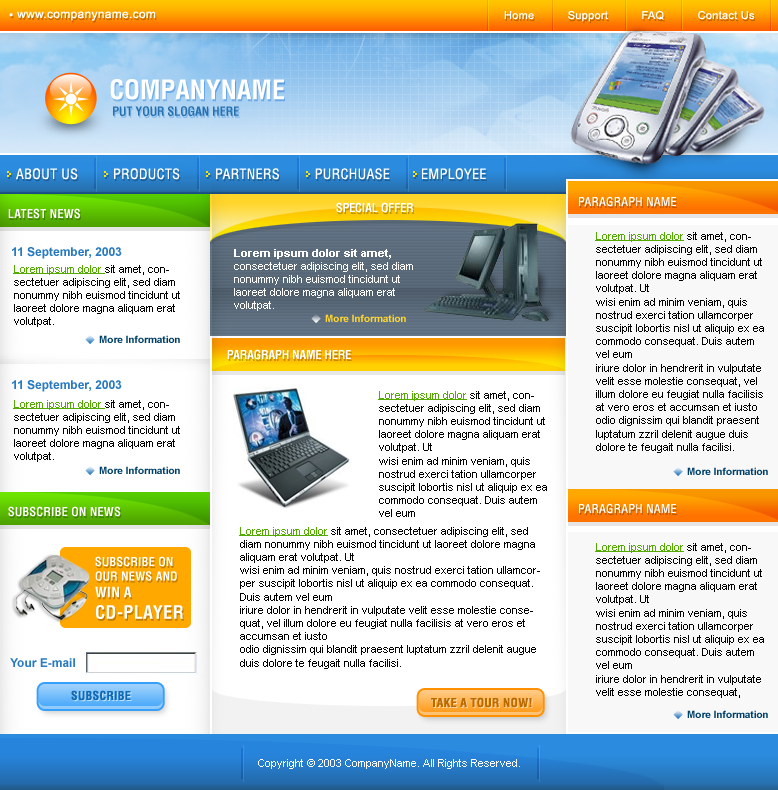
<style>
.page{position:relative;width:778px;height:790px;background:#ffffff}
.page>*{position:absolute;margin:0}
.t1{font:12px "ArialMT";letter-spacing:0.025em;color:#ffffff}
.t2{font:11px "ArialMT";letter-spacing:0.025em;color:#ffffff}
.t3{font:26.4px "AGLettericaCondensed-Bold";color:#ffffff;text-transform:uppercase}
.t4{font:12.1px "AGLettericaCondensed-Bold";color:#2770ae;text-transform:uppercase}
.t5{font:14px "AGLettericaCondensed-Roman";letter-spacing:0.025em;color:#ffffff;text-transform:uppercase}
.t6{font:12px "AGLettericaCondensed-Roman";letter-spacing:0.025em;color:#ffffff;text-transform:uppercase}
.t7{font:12px "AGLettericaCondensed-Bold";letter-spacing:0.025em;color:#ffffff;text-transform:uppercase}
.t8{font:12px "AGLettericaCondensed-Bold";color:#ffffff;text-transform:uppercase}
.t9{font:11px "ArialMT";color:#000000}
.t10{font:11px "ArialMT";color:#54ab00;text-decoration:underline}
.t11{font:12px "Arial-BoldMT";color:#287bc1}
.t12{font:11px "ArialMT";color:#ffffff}
.t13{font:11px "Arial-BoldMT";color:#ffffff}
.t14{font:10px "Arial-BoldMT";color:#ffd62f}
.t15{font:10px "Arial-BoldMT";color:#00416a}
.t16{font:14px "AGLettericaCondensed-Bold";letter-spacing:0.025em;color:#ffffff;text-transform:uppercase}
.t17{font:18px "AGLettericaCondensed-Bold";letter-spacing:0.025em;color:#ffffff;text-transform:uppercase}
.t18{font:12px "AGLettericaCondensed-Bold";letter-spacing:0.025em;color:#116ab5;text-transform:uppercase}
.t19{font:12px "AGLettericaCondensed-Bold";letter-spacing:0.025em;color:#bb6a00;text-transform:uppercase}
</style>
<div class="page">
<p class="t1" style="left:9px;top:11px;width:147px;height:10px">• www.companyname.com</p>
<p class="t2" style="left:504px;top:10px;width:251px;height:12px">Home          Support          FAQ          Contact Us</p>
<p class="t3" style="left:110px;top:79px;width:174px;height:21px">COMPANYNAME</p>
<p class="t4" style="left:113px;top:106px;width:126px;height:10px">put your slogan here</p>
<p class="t5" style="left:16px;top:168px;width:470px;height:12px">About Us         Products         Partners         Purchuase        Employee</p>
<p class="t6" style="left:579px;top:196px;width:97px;height:11px">Paragraph name</p>
<p class="t7" style="left:8px;top:208px;width:72px;height:11px">Latest News</p>
<p class="t8" style="left:336px;top:202px;width:77px;height:11px">Special offer</p>
<p class="t9" style="left:595px;top:232px;width:169px;height:221px"><span class="t10">Lorem ipsum dolor</span> sit amet, consectetuer adipiscing elit, sed diam nonummy nibh euismod tincidunt ut laoreet dolore magna aliquam erat volutpat. Ut<br>wisi enim ad minim veniam, quis nostrud exerci tation ullamcorper suscipit lobortis nisl ut aliquip ex ea commodo consequat. Duis autem vel eum<br>iriure dolor in hendrerit in vulputate velit esse molestie consequat, vel illum dolore eu feugiat nulla facilisis at vero eros et accumsan et iusto<br>odio dignissim qui blandit praesent luptatum zzril delenit augue duis dolore te feugait nulla facilisi.</p>
<p class="t11" style="left:12px;top:247px;width:110px;height:12px">11 September, 2003</p>
<p class="t12" style="left:234px;top:249px;width:179px;height:62px"><span class="t13">Lorem ipsum dolor sit amet, </span>consectetuer adipiscing elit, sed diam nonummy nibh euismod tincidunt ut laoreet dolore magna aliquam erat volutpat.</p>
<p class="t9" style="left:13px;top:265px;width:167px;height:62px"><span class="t10">Lorem ipsum dolor </span>sit amet, consectetuer adipiscing elit, sed diam nonummy nibh euismod tincidunt ut laoreet dolore magna aliquam erat volutpat.</p>
<p class="t14" style="left:325px;top:314px;width:81px;height:8px">More Information</p>
<p class="t15" style="left:99px;top:335px;width:81px;height:8px">More Information</p>
<p class="t8" style="left:227px;top:349px;width:124px;height:11px">paragraph name here</p>
<p class="t11" style="left:12px;top:380px;width:110px;height:12px">11 September, 2003</p>
<p class="t9" style="left:13px;top:400px;width:167px;height:62px"><span class="t10">Lorem ipsum dolor </span>sit amet, consectetuer adipiscing elit, sed diam nonummy nibh euismod tincidunt ut laoreet dolore magna aliquam erat volutpat.</p>
<p class="t9" style="left:378px;top:391px;width:169px;height:126px"><span class="t10">Lorem ipsum dolor</span> sit amet, consectetuer adipiscing elit, sed diam nonummy nibh euismod tincidunt ut laoreet dolore magna aliquam erat volutpat. Ut<br>wisi enim ad minim veniam, quis nostrud exerci tation ullamcorper suscipit lobortis nisl ut aliquip ex ea commodo consequat. Duis autem vel eum</p>
<p class="t15" style="left:99px;top:466px;width:81px;height:8px">More Information</p>
<p class="t15" style="left:687px;top:467px;width:81px;height:8px">More Information</p>
<p class="t7" style="left:8px;top:506px;width:113px;height:11px">Subscribe on news</p>
<p class="t6" style="left:579px;top:503px;width:97px;height:11px">Paragraph name</p>
<p class="t9" style="left:239px;top:527px;width:301px;height:142px"><span class="t10">Lorem ipsum dolor</span> sit amet, consectetuer adipiscing elit, sed diam nonummy nibh euismod tincidunt ut laoreet dolore magna aliquam erat volutpat. Ut<br>wisi enim ad minim veniam, quis nostrud exerci tation ullamcorper suscipit lobortis nisl ut aliquip ex ea commodo consequat. Duis autem vel eum <br>iriure dolor in hendrerit in vulputate velit esse molestie consequat, vel illum dolore eu feugiat nulla facilisis at vero eros et accumsan et iusto<br>odio dignissim qui blandit praesent luptatum zzril delenit augue duis dolore te feugait nulla facilisi.</p>
<p class="t9" style="left:595px;top:543px;width:169px;height:155px"><span class="t10">Lorem ipsum dolor</span> sit amet, consectetuer adipiscing elit, sed diam nonummy nibh euismod tincidunt ut laoreet dolore magna aliquam erat volutpat. Ut<br>wisi enim ad minim veniam, quis nostrud exerci tation ullamcorper suscipit lobortis nisl ut aliquip ex ea commodo consequat. Duis autem vel eum<br>iriure dolor in hendrerit in vulputate velit esse molestie consequat,</p>
<p class="t7" style="left:95px;top:556px;width:88px;height:63px">Subscribe on<br>our news and<br><span class="t16">WIN A <br></span><span class="t17">CD-PLAYER</span></p>
<p class="t11" style="left:10px;top:658px;width:65px;height:9px">Your E-mail</p>
<p class="t18" style="left:71px;top:690px;width:60px;height:11px">Subscribe</p>
<p class="t19" style="left:431px;top:697px;width:101px;height:11px">Take a Tour NOW!</p>
<p class="t15" style="left:687px;top:710px;width:81px;height:8px">More Information</p>
<p class="t12" style="left:258px;top:759px;width:262px;height:10px">Copyright © 2003 CompanyName. All Rights Reserved.</p>
</div>
